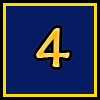
<style>
.page{position:relative;width:100px;height:100px;background:#061963}
.page>*{position:absolute;margin:0}
.t1{font:60px "Herculanum";font-weight:bold}
</style>
<div class="page">
<p class="t1" style="left:36px;top:28px;width:34px;height:39px">4</p>
</div>
